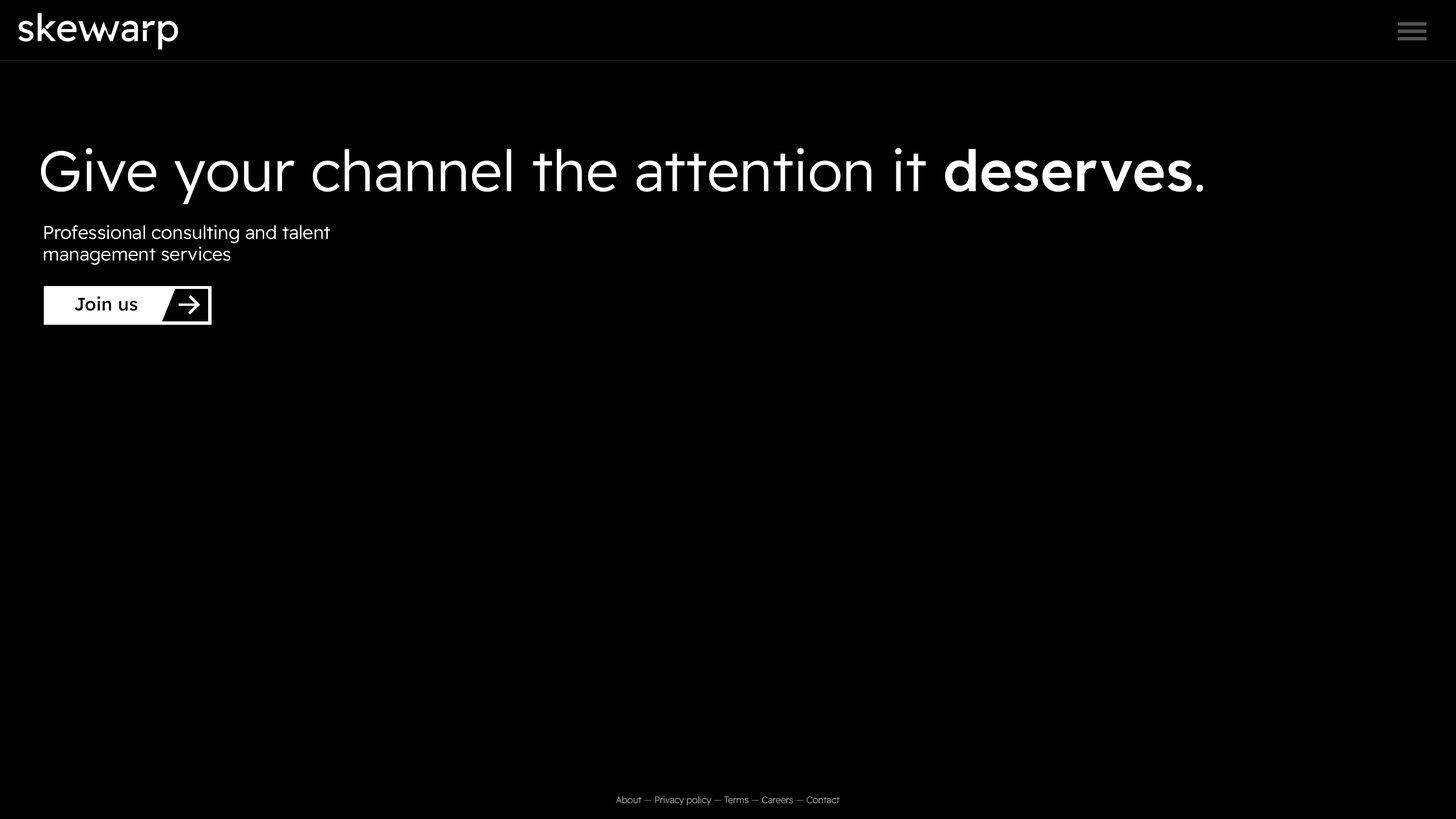
<style>
.page{position:relative;width:1456px;height:819px;background:#000000}
.page>*{position:absolute;margin:0}
.t1{font:56.9px "ReadexPro-Light";color:#ffffff}
.t2{font:56.9px "ReadexPro-Medium";color:#ffffff}
.t3{font:18.2px "ReadexPro-Light";color:#ffffff}
.t4{font:18.2px "ReadexPro-Medium";color:#000000}
.t5{font:9.1px "ReadexPro-ExtraLight";color:#9d9d9d}
.t6{font:9.1px "ReadexPro-ExtraLight";color:#717171}
.t7{font:9.1px "ReadexPro-ExtraLight";color:#727272}
</style>
<div class="page">
<p class="t1" style="left:41px;top:148px;width:1162px;height:56px">Give your channel the attention it <span class="t2">deserves</span>.</p>
<p class="t3" style="left:44px;top:225px;width:286px;height:40px">Professional consulting and talent<br>management services</p>
<p class="t4" style="left:75px;top:296px;width:63px;height:15px">Join us</p>
<p class="t5" style="left:616px;top:796px;width:224px;height:9px">About <span class="t6">— </span>Privacy policy <span class="t7">— </span>Terms <span class="t7">— </span>Careers <span class="t7">— </span>Contact</p>
</div>
